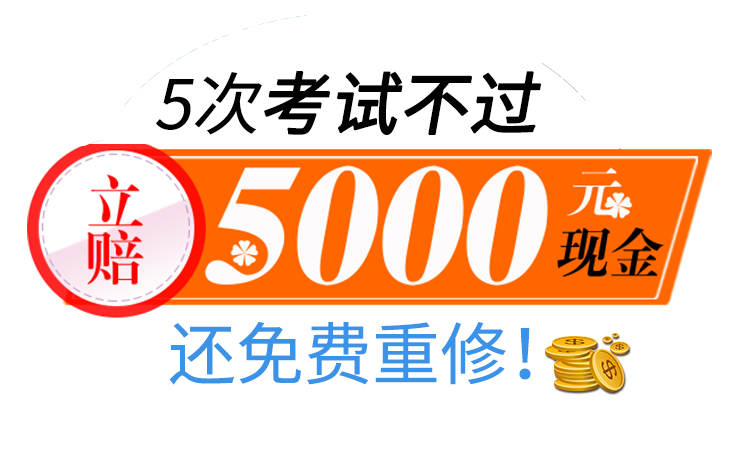
<style>
.page{position:relative;width:739px;height:467px;background:#ffffff}
.page>*{position:absolute;margin:0}
.t1{font:68px "SourceHanSansCN-Regular";color:#030100;font-weight:bold;font-style:italic}
.t2{font:68px "SourceHanSansCN-Regular";color:#030100;font-style:italic}
.t3{font:68px "SourceHanSansCN-Regular";color:#3b93e8}
</style>
<div class="page">
<p class="t1" style="left:156px;top:71px;width:385px;height:64px"><span class="t2">5次</span>考试不过</p>
<p class="t3" style="left:169px;top:322px;width:362px;height:63px">还免费重修！</p>
</div>
